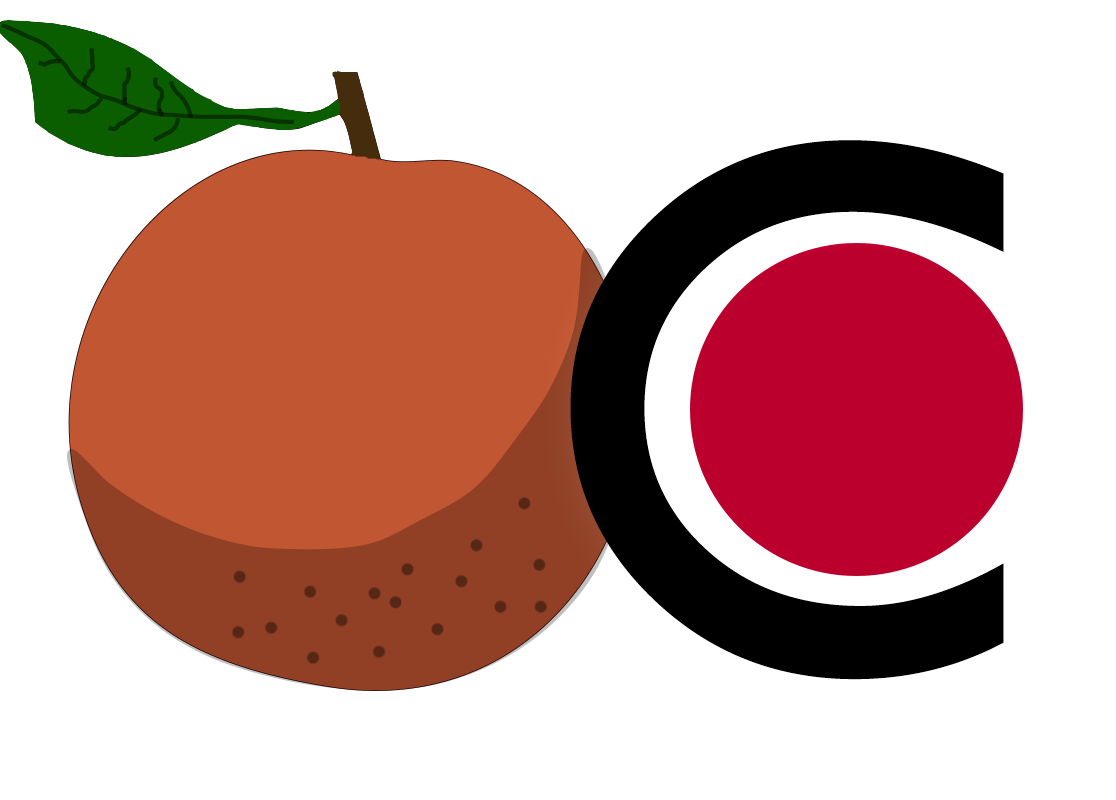
<style>
.page{position:relative;width:1116px;height:800px;background:#ffffff}
.page>*{position:absolute;margin:0}
.t1{font:812.5px "TwCenMT-Regular";color:#000000}
</style>
<div class="page">
<p class="t1" style="left:570px;top:140px;width:434px;height:540px">C</p>
</div>
